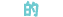
<style>
.page{position:relative;width:63px;height:17px;background:#ffffff}
.page>*{position:absolute;margin:0}
.t1{font:10.5px "shetumodengxiaofangti";color:#6ecad0;font-weight:bold;scale:0.94 1}
</style>
<div class="page">
<p class="t1" style="left:24px;top:0px;width:15px;height:17px">的</p>
</div>
